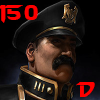
<style>
.page{position:relative;width:100px;height:100px}
.page>*{position:absolute;margin:0}
.t1{font:22px "StarcraftNormal";color:#fe0000}
</style>
<div class="page">
<p class="t1" style="left:0px;top:5px;width:38px;height:18px">150</p>
<p class="t1" style="left:76px;top:82px;width:19px;height:15px">D</p>
</div>
